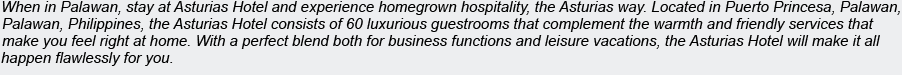
<style>
.page{position:relative;width:902px;height:75px;background:#edeef0}
.page>*{position:absolute;margin:0}
.t1{font:15px "Arial-ItalicMT";color:#000000}
</style>
<div class="page">
<p class="t1" style="left:2px;top:1px;width:898px;height:14px">When in Palawan, stay at Asturias Hotel and experience homegrown hospitality, the Asturias way. Located in Puerto Princesa, Palawan,</p>
<p class="t1" style="left:2px;top:18px;width:872px;height:14px">Palawan, Philippines, the Asturias Hotel consists of 60 luxurious guestrooms that complement the warmth and friendly services that</p>
<p class="t1" style="left:2px;top:35px;width:878px;height:14px">make you feel right at home. With a perfect blend both for business functions and leisure vacations, the Asturias Hotel will make it all</p>
<p class="t1" style="left:1px;top:52px;width:172px;height:14px">happen flawlessly for you.</p>
</div>
